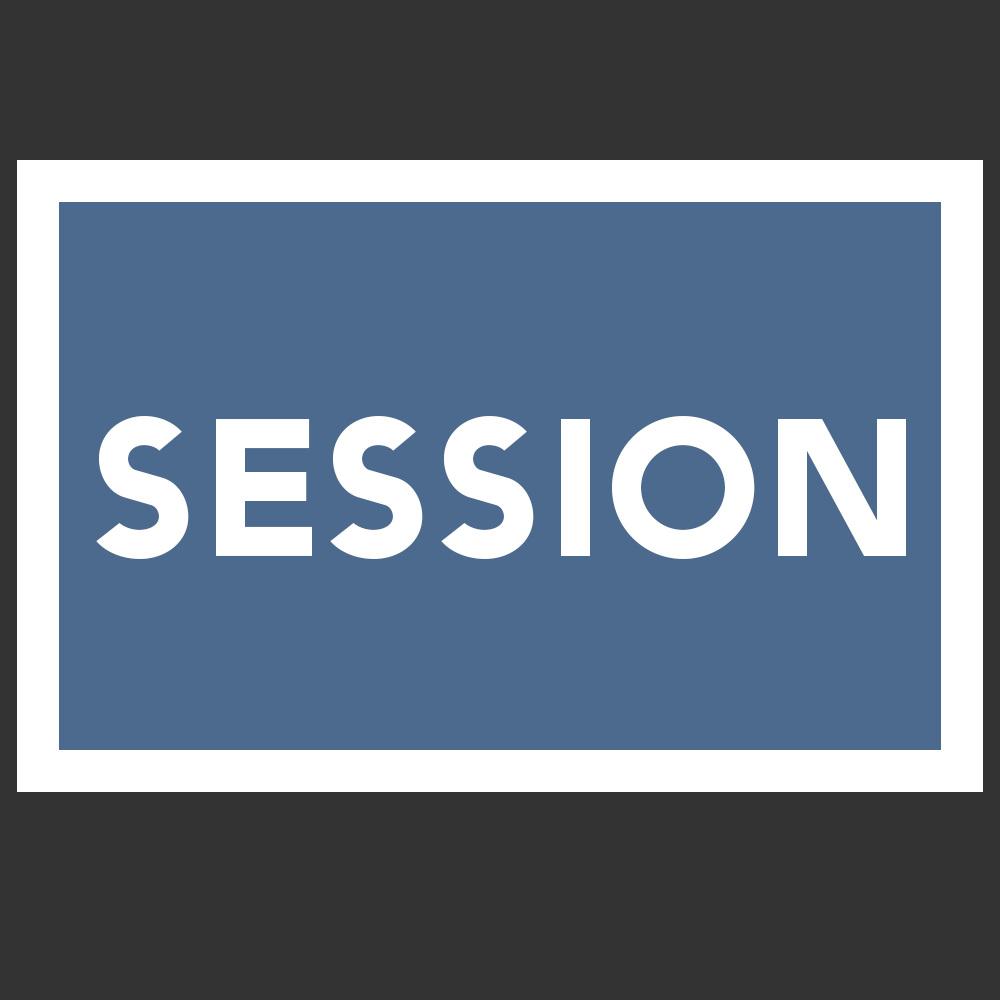
<style>
.page{position:relative;width:1000px;height:1000px;background:#4c6a8d}
.page>*{position:absolute;margin:0}
.t1{font:194.1px "Arya-Single";color:#ffffff}
</style>
<div class="page">
<p class="t1" style="left:96px;top:416px;width:810px;height:143px">Session</p>
</div>
